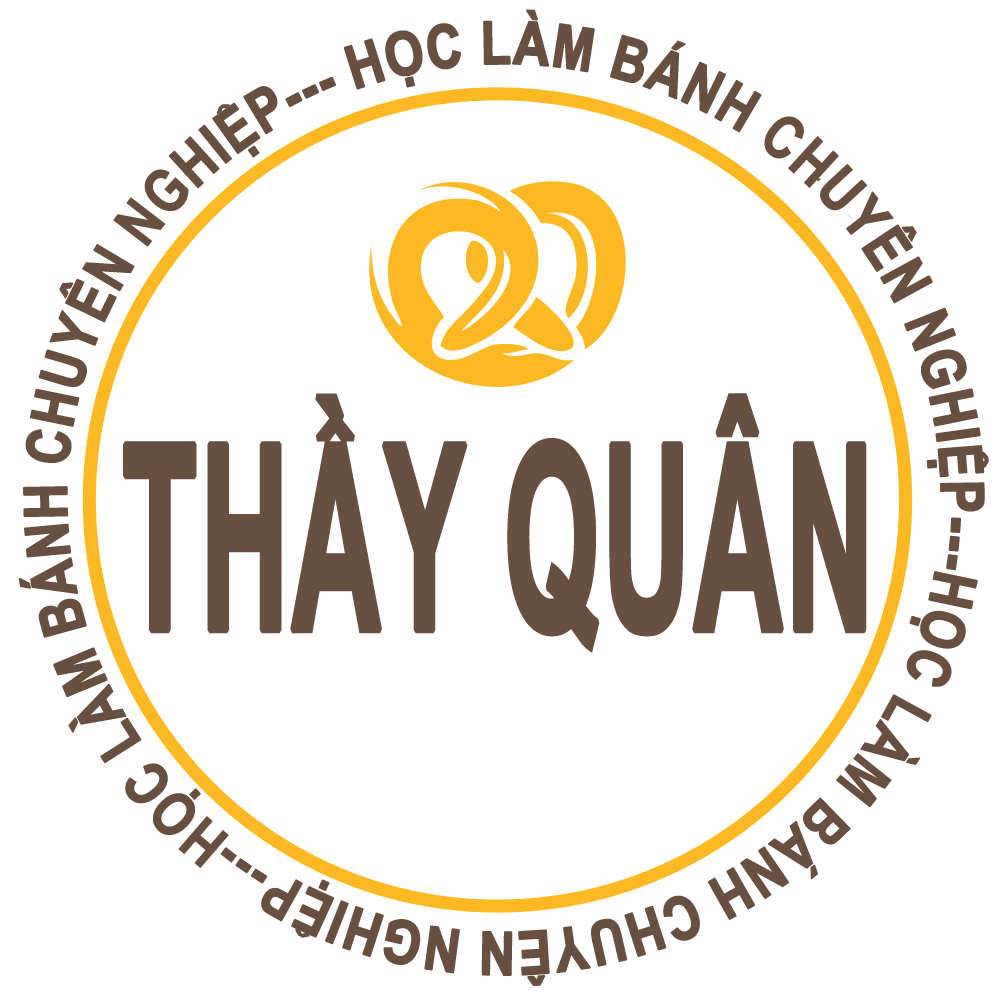
<style>
.page{position:relative;width:1000px;height:1000px;background:#ffffff}
.page>*{position:absolute;margin:0}
.t1{font:60px/76px "Arial-BoldMT";color:#684f40;font-weight:bold;scale:0.83 1}
.t2{font:259px "Arial-BoldMT";color:#684f40;font-weight:bold;scale:0.47 1}
</style>
<div class="page">
<p class="t1" style="left:18px;top:9px;width:971px;height:977px">HỌC LÀM BÁNH CHUYÊN NGHIỆP---HỌC LÀM BÁNH CHUYÊN NGHIỆP---HỌC LÀM BÁNH CHUYÊN NGHIỆP---</p>
<p class="t2" style="left:123px;top:393px;width:744px;height:260px">THẦY QUÂN</p>
</div>
